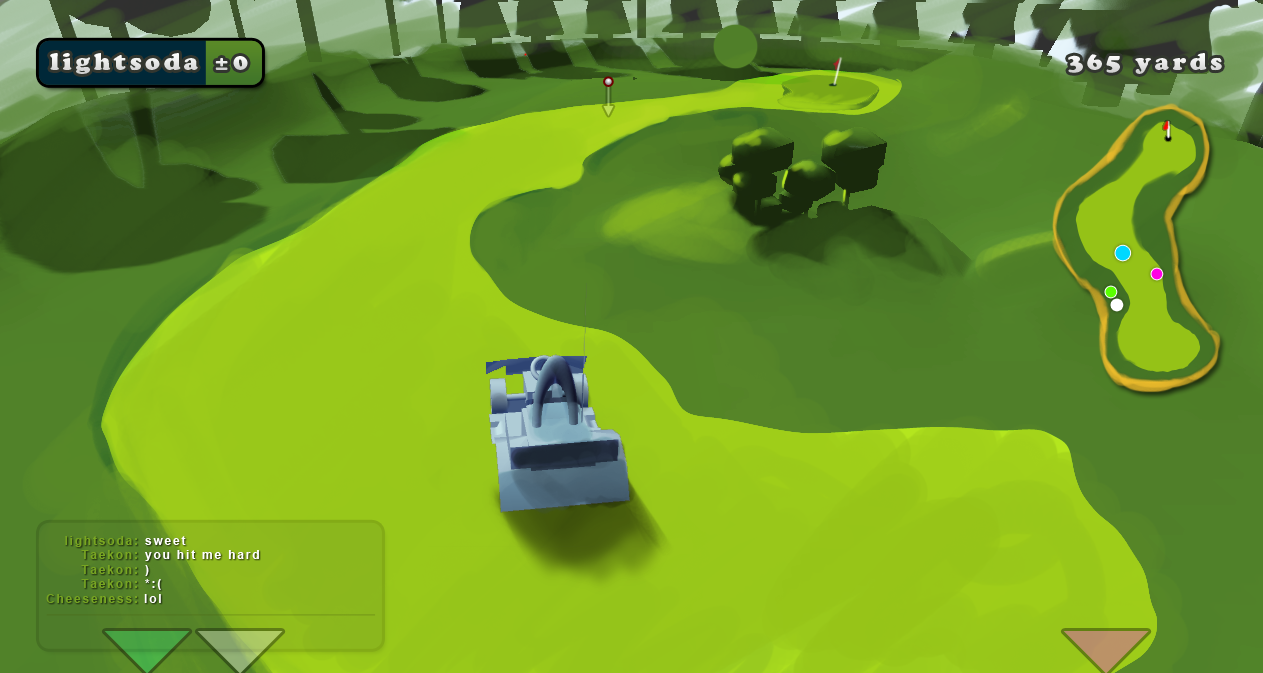
<style>
.page{position:relative;width:1263px;height:673px}
.page>*{position:absolute;margin:0}
.t1{font:24px "CooperBlackStd";letter-spacing:0.15em;color:#e6e7e6}
.t2{font:24px "CooperBlackStd";letter-spacing:0.15em;color:#e7e7e7}
.t3{font:24px "CooperBlackStd";letter-spacing:0.15em;color:#e9eae9}
.t4{font:12px "Arial-BoldMT";letter-spacing:0.15em;color:#78a522}
.t5{font:12px "Arial-BoldMT";letter-spacing:0.15em;color:#ffffff}
</style>
<div class="page">
<p class="t1" style="left:50px;top:53px;width:148px;height:21px">lightsoda</p>
<p class="t2" style="left:1068px;top:53px;width:154px;height:21px">365 yards</p>
<p class="t3" style="left:215px;top:56px;width:33px;height:14px">±0</p>
<p class="t4" style="left:46px;top:536px;width:91px;height:67px;text-align:right">lightsoda:<br>Taekon:<br>Taekon:<br>Taekon:<br>Cheeseness:</p>
<p class="t5" style="left:145px;top:536px;width:41px;height:9px">sweet</p>
<p class="t5" style="left:145px;top:550px;width:114px;height:11px">you hit me hard</p>
<p class="t5" style="left:145px;top:565px;width:4px;height:11px">)</p>
<p class="t5" style="left:145px;top:579px;width:16px;height:11px">*:(</p>
<p class="t5" style="left:144px;top:594px;width:17px;height:9px">lol</p>
</div>
